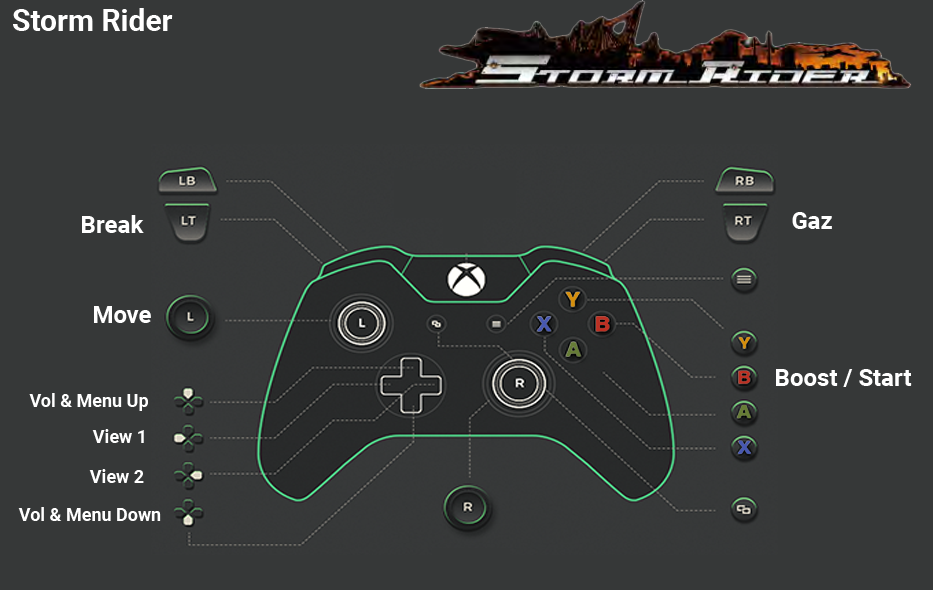
<style>
.page{position:relative;width:933px;height:590px;background:#363838}
.page>*{position:absolute;margin:0}
.t1{font:30px "Roboto-Bold";color:#ffffff}
.t2{font:24px "Roboto-Bold";color:#ffffff}
.t3{font:18px "Roboto-Bold";color:#ffffff}
</style>
<div class="page">
<p class="t1" style="left:13px;top:8px;width:160px;height:23px">Storm Rider</p>
<p class="t2" style="left:82px;top:215px;width:62px;height:18px">Break</p>
<p class="t2" style="left:792px;top:212px;width:40px;height:17px">Gaz</p>
<p class="t2" style="left:94px;top:306px;width:57px;height:17px">Move</p>
<p class="t2" style="left:776px;top:369px;width:136px;height:18px">Boost / Start</p>
<p class="t3" style="left:29px;top:393px;width:119px;height:18px">Vol &amp; Menu Up</p>
<p class="t3" style="left:92px;top:429px;width:52px;height:14px">View 1</p>
<p class="t3" style="left:89px;top:469px;width:55px;height:14px">View 2</p>
<p class="t3" style="left:18px;top:507px;width:143px;height:14px">Vol &amp; Menu Down</p>
</div>
